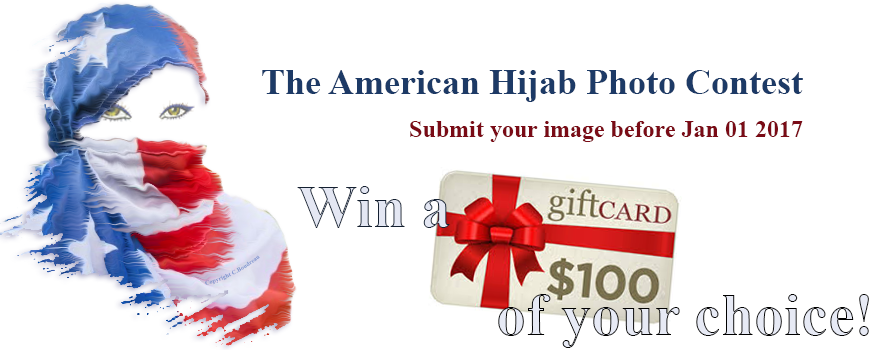
<style>
.page{position:relative;width:873px;height:350px;background:#ffffff}
.page>*{position:absolute;margin:0}
.t1{font:36px "TimesNewRomanPS-BoldMT";color:#1d3a66}
.t2{font:24px "TimesNewRomanPS-BoldMT";color:#7a0b16}
.t3{font:60px "TimesNewRomanPS-BoldMT";color:#e4e7f3}
.t4{font:6px "TimesNewRomanPS-BoldMT";color:#869ad2}
.t5{font:60px "TimesNewRomanPS-BoldMT";color:#e7eaf5}
</style>
<div class="page">
<p class="t1" style="left:262px;top:70px;width:541px;height:32px">The American Hijab Photo Contest</p>
<p class="t2" style="left:410px;top:121px;width:393px;height:21px">Submit your image before Jan 01 2017</p>
<p class="t3" style="left:297px;top:186px;width:153px;height:42px">Win a</p>
<p class="t4" style="left:205px;top:255px;width:55px;height:30px;rotate:-27deg">Copyright C.Boudreau</p>
<p class="t5" style="left:498px;top:294px;width:371px;height:54px">of your choice!</p>
</div>
